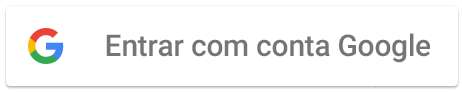
<style>
.page{position:relative;width:462px;height:92px;background:#ffffff}
.page>*{position:absolute;margin:0}
.t1{font:30px "Roboto-Medium";letter-spacing:-0.01em;color:#757575}
</style>
<div class="page">
<p class="t1" style="left:106px;top:33px;width:324px;height:30px">Entrar com conta Google</p>
</div>
